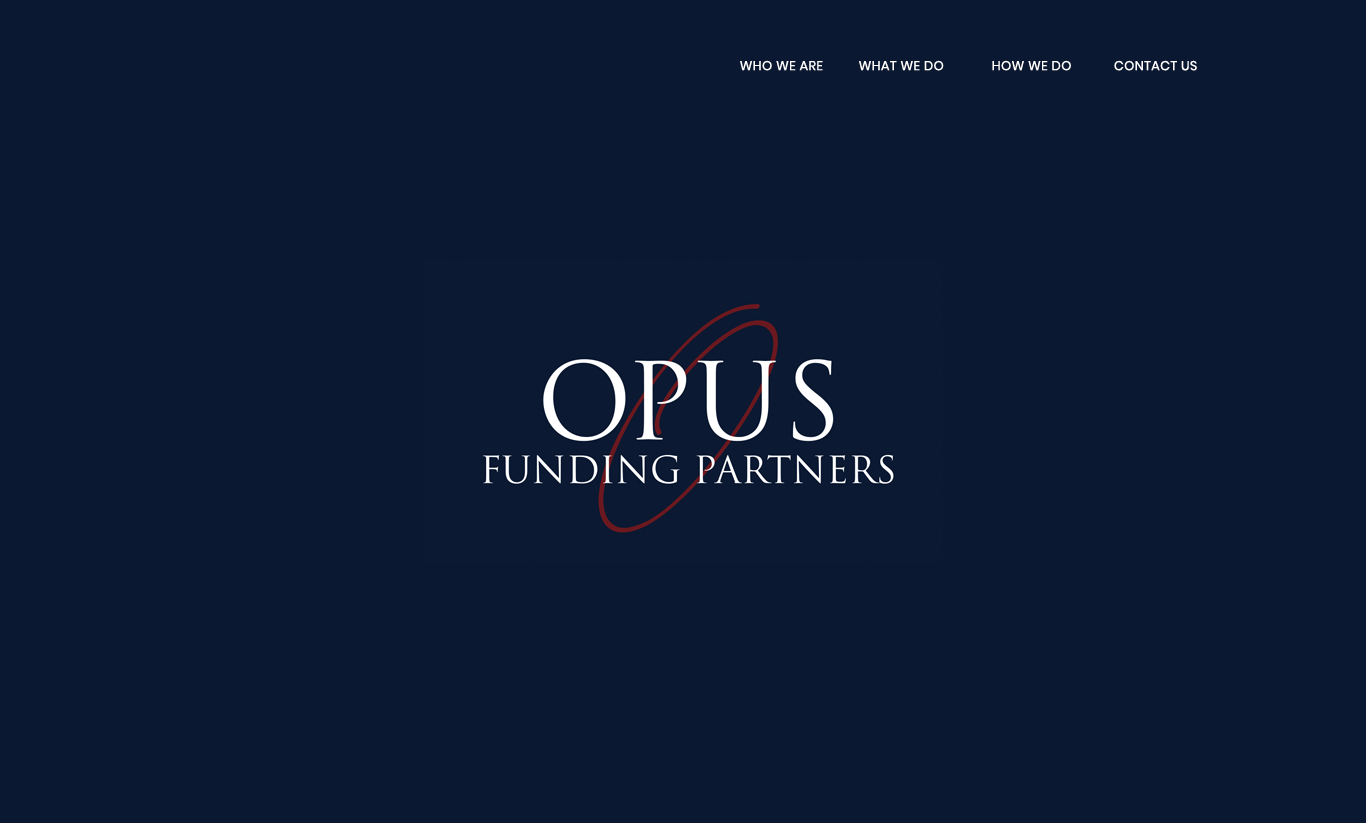
<style>
.page{position:relative;width:1366px;height:823px;background:#0b1831}
.page>*{position:absolute;margin:0}
.t1{font:13px "Poppins-Regular";letter-spacing:0.025em;color:#ffffff}
</style>
<div class="page">
<p class="t1" style="left:740px;top:60px;width:457px;height:11px">WHO WE ARE    WHAT WE DO  HOW WE DO     CONTACT US</p>
</div>
